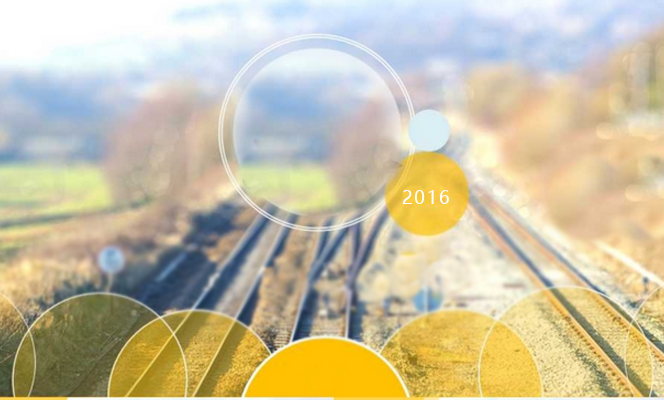
<style>
.page{position:relative;width:664px;height:400px}
.page>*{position:absolute;margin:0}
.t1{font:18px "MicrosoftYaHei";letter-spacing:0.1em;color:#ffffff}
</style>
<div class="page">
<p class="t1" style="left:402px;top:190px;width:47px;height:14px">2016</p>
</div>
